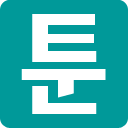
<style>
.page{position:relative;width:128px;height:128px;background:#009999}
.page>*{position:absolute;margin:0}
.t1{font:110px "NEXONFootballGothicB";color:#ffffff}
</style>
<div class="page">
<p class="t1" style="left:21px;top:14px;width:85px;height:100px">툰</p>
</div>
